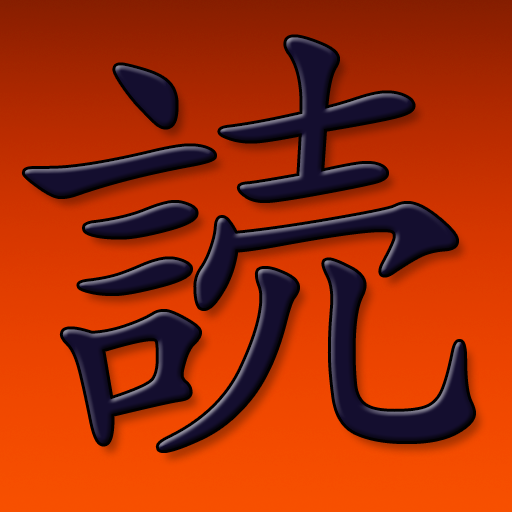
<style>
.page{position:relative;width:512px;height:512px}
.page>*{position:absolute;margin:0}
.t1{font:500px "STKaiti";color:#140e2f}
</style>
<div class="page">
<p class="t1" style="left:24px;top:37px;width:449px;height:413px">読</p>
</div>
